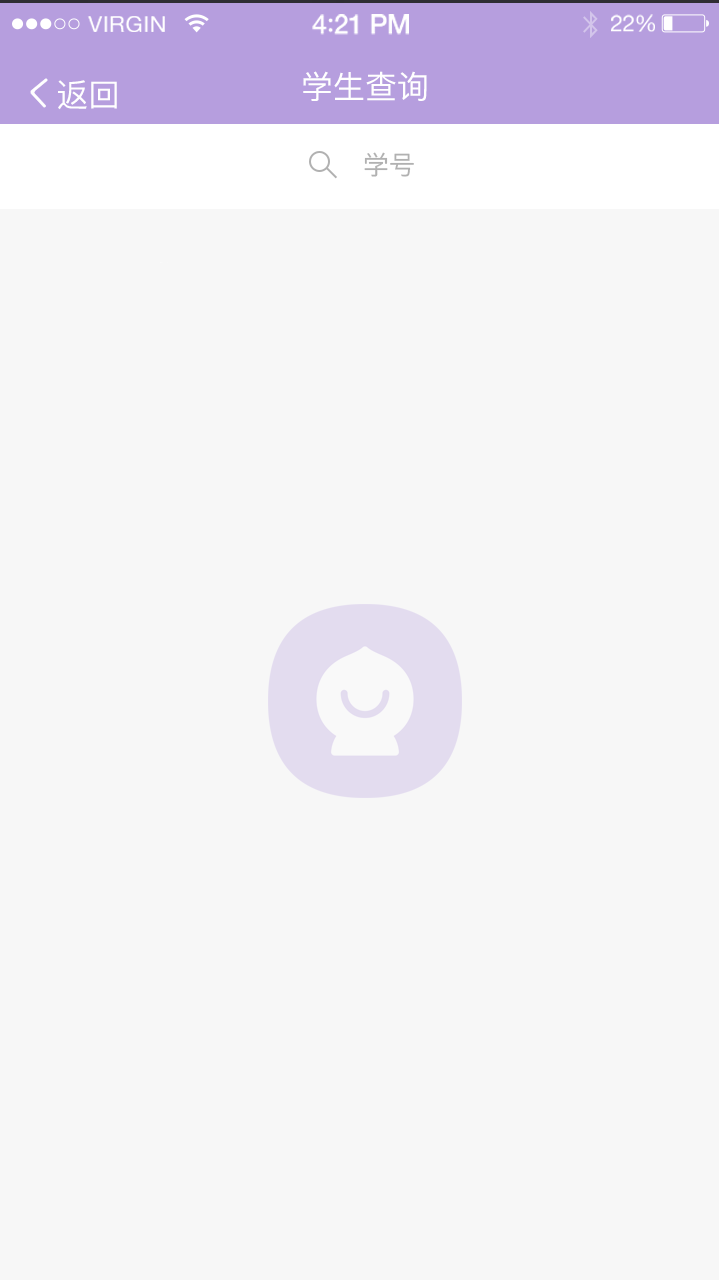
<style>
.page{position:relative;width:719px;height:1280px;background:#f7f7f7}
.page>*{position:absolute;margin:0}
.t1{font:22.5px "HelveticaNeue";letter-spacing:0.02em;color:#ffffff}
.t2{font:27px "HelveticaNeue-Medium";letter-spacing:-0.02em;color:#ffffff}
.t3{font:27px "Avenir-Medium";letter-spacing:-0.02em;color:#ffffff}
.t4{font:22.6px "HelveticaNeue";letter-spacing:-0.02em;color:#ffffff}
.t5{font:32px "PingFangSC-Medium";color:#ffffff}
.t6{font:26px "PingFangSC-Medium";color:#b1b1b1}
</style>
<div class="page">
<p class="t1" style="left:87px;top:16px;width:78px;height:16px">VIRGIN</p>
<p class="t2" style="left:312px;top:14px;width:97px;height:21px">4<span class="t3">:</span>21 PM</p>
<p class="t4" style="left:611px;top:14px;width:44px;height:18px">22%</p>
<p class="t5" style="left:303px;top:71px;width:124px;height:30px">学生查询</p>
<p class="t5" style="left:58px;top:80px;width:59px;height:30px">返回</p>
<p class="t6" style="left:364px;top:152px;width:50px;height:25px">学号</p>
</div>
